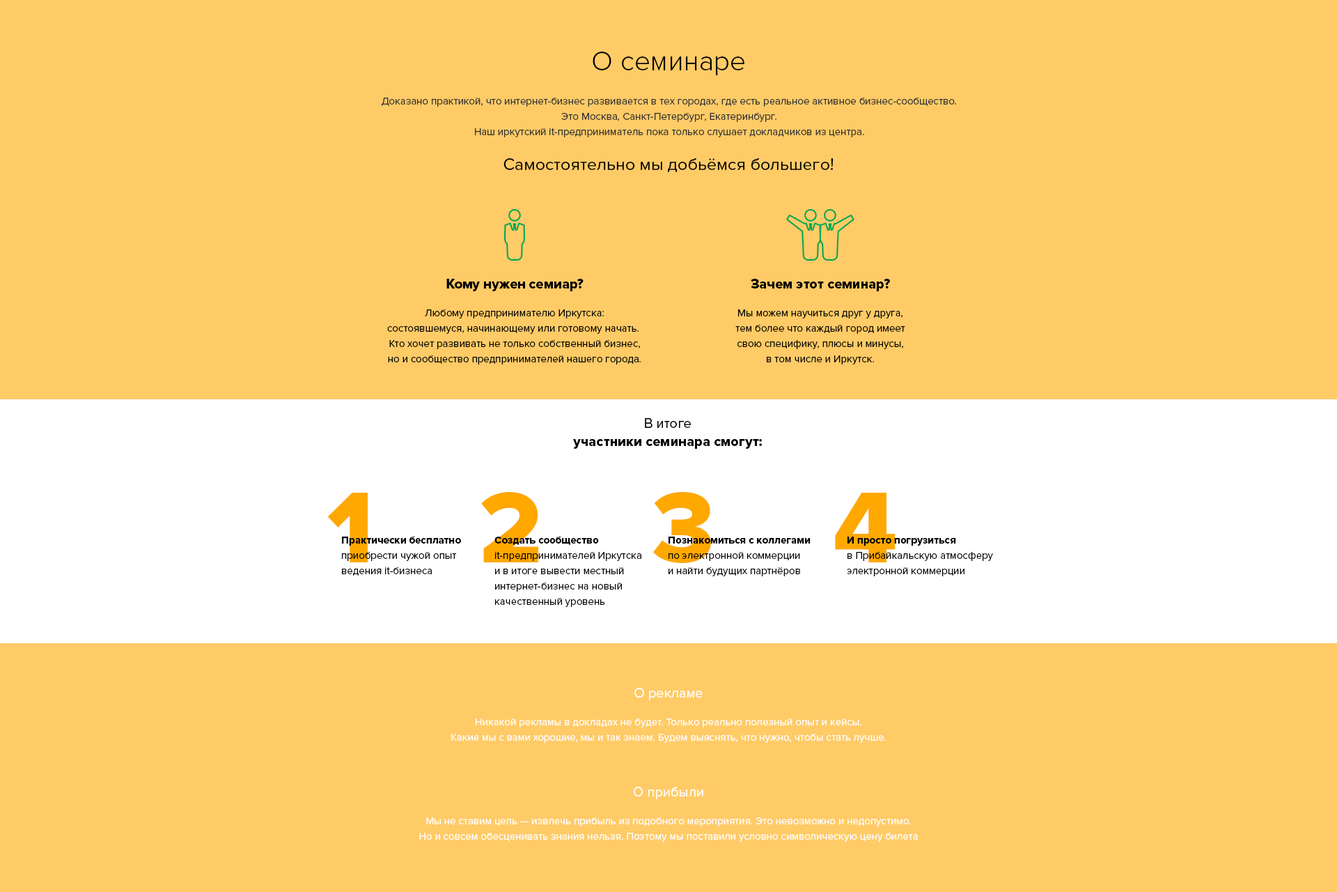
<style>
.page{position:relative;width:1337px;height:892px;background:#ffcb67}
.page>*{position:absolute;margin:0}
.t1{font:27.9px "ProximaNova-Light";letter-spacing:0.01em;color:#000000}
.t2{font:10.4px/15.3px "ProximaNova-Regular";color:#333333}
.t3{font:17.4px "ProximaNova-Regular";color:#000000}
.t4{font:13.9px "ProximaNova-Extrabld";color:#000000}
.t5{font:10.4px/15.3px "ProximaNova-Regular";color:#000000}
.t6{font:13.9px/18.1px "ProximaNova-Extrabld";color:#000000}
.t7{font:13.9px/18.1px "ProximaNova-Regular";color:#000000}
.t8{font:104.5px "ProximaNova-Extrabld";color:#ffa800}
.t9{font:10.4px/15.3px "ProximaNova-Extrabld";color:#000000}
.t10{font:13.9px "ProximaNova-Regular";color:#ffffff}
.t11{font:10.4px/15.3px "ProximaNova-Regular";color:#ffffff}
</style>
<div class="page">
<p class="t1" style="left:593px;top:52px;width:152px;height:23px">О семинаре</p>
<p class="t2" style="left:382px;top:98px;width:574px;height:39px;text-align:center">Доказано практикой, что интернет-бизнес развивается в тех городах, где есть реальное активное бизнес-сообщество.<br>Это Москва, Санкт-Петербург, Екатеринбург.<br>Наш иркутский it-предприниматель пока только слушает докладчиков из центра.</p>
<p class="t3" style="left:504px;top:158px;width:330px;height:14px">Самостоятельно мы добьёмся большего!</p>
<p class="t4" style="left:446px;top:279px;width:138px;height:12px">Кому нужен семиар?</p>
<p class="t4" style="left:751px;top:279px;width:139px;height:12px">Зачем этот семинар?</p>
<p class="t5" style="left:387px;top:309px;width:254px;height:55px;text-align:center">Любому предпринимателю Иркутска:<br>состоявшемуся, начинающему или готовому начать. <br>Кто хочет развивать не только собственный бизнес,<br>но и сообщество предпринимателей нашего города.</p>
<p class="t5" style="left:736px;top:309px;width:170px;height:55px;text-align:center">Мы можем научиться друг у друга,<br>тем более что каждый город имеет<br>свою специфику, плюсы и минусы,<br>в том числе и Иркутск.</p>
<p class="t6" style="left:573px;top:418px;width:189px;height:31px;text-align:center"><span class="t7">В итоге<br></span>участники семинара смогут:</p>
<p class="t8" style="left:327px;top:492px;width:41px;height:70px">1</p>
<p class="t8" style="left:481px;top:492px;width:57px;height:70px">2</p>
<p class="t8" style="left:653px;top:492px;width:58px;height:71px">3</p>
<p class="t8" style="left:835px;top:492px;width:61px;height:70px">4</p>
<p class="t5" style="left:342px;top:536px;width:119px;height:39px"><span class="t9">Практически бесплатно</span> <br>приобрести чужой опыт <br>ведения it-бизнеса</p>
<p class="t5" style="left:495px;top:536px;width:147px;height:71px"><span class="t9">Создать сообщество<br></span>it-предпринимателей Иркутска <br>и в итоге вывести местный <br>интернет-бизнес на новый <br>качественный уровень</p>
<p class="t5" style="left:669px;top:536px;width:142px;height:40px"><span class="t9">Познакомиться с коллегами</span> <br>по электронной коммерции <br>и найти будущих партнёров</p>
<p class="t5" style="left:847px;top:536px;width:146px;height:40px"><span class="t9">И просто погрузиться <br></span>в Прибайкальскую атмосферу <br>электронной коммерции</p>
<p class="t10" style="left:635px;top:688px;width:68px;height:12px">О рекламе</p>
<p class="t11" style="left:451px;top:718px;width:435px;height:25px;text-align:center">Никакой рекламы в докладах не будет. Только реально полезный опыт и кейсы.<br>Какие мы с вами хорошие, мы и так знаем. Будем выяснять, что нужно, чтобы стать лучше.</p>
<p class="t10" style="left:634px;top:786px;width:70px;height:13px">О прибыли</p>
<p class="t11" style="left:419px;top:817px;width:499px;height:24px;text-align:center">Мы не ставим цель — извлечь прибыль из подобного мероприятия. Это невозможно и недопустимо.<br>Но и совсем обесценивать знания нельзя. Поэтому мы поставили условно символическую цену билета</p>
</div>
